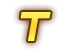
<style>
.page{position:relative;width:72px;height:54px;background:#ffffff}
.page>*{position:absolute;margin:0}
.t1{font:42.7px "FOTBullheaded";letter-spacing:0.015em;color:#feeb57;font-style:italic}
</style>
<div class="page">
<p class="t1" style="left:20px;top:12px;width:31px;height:29px">T</p>
</div>
